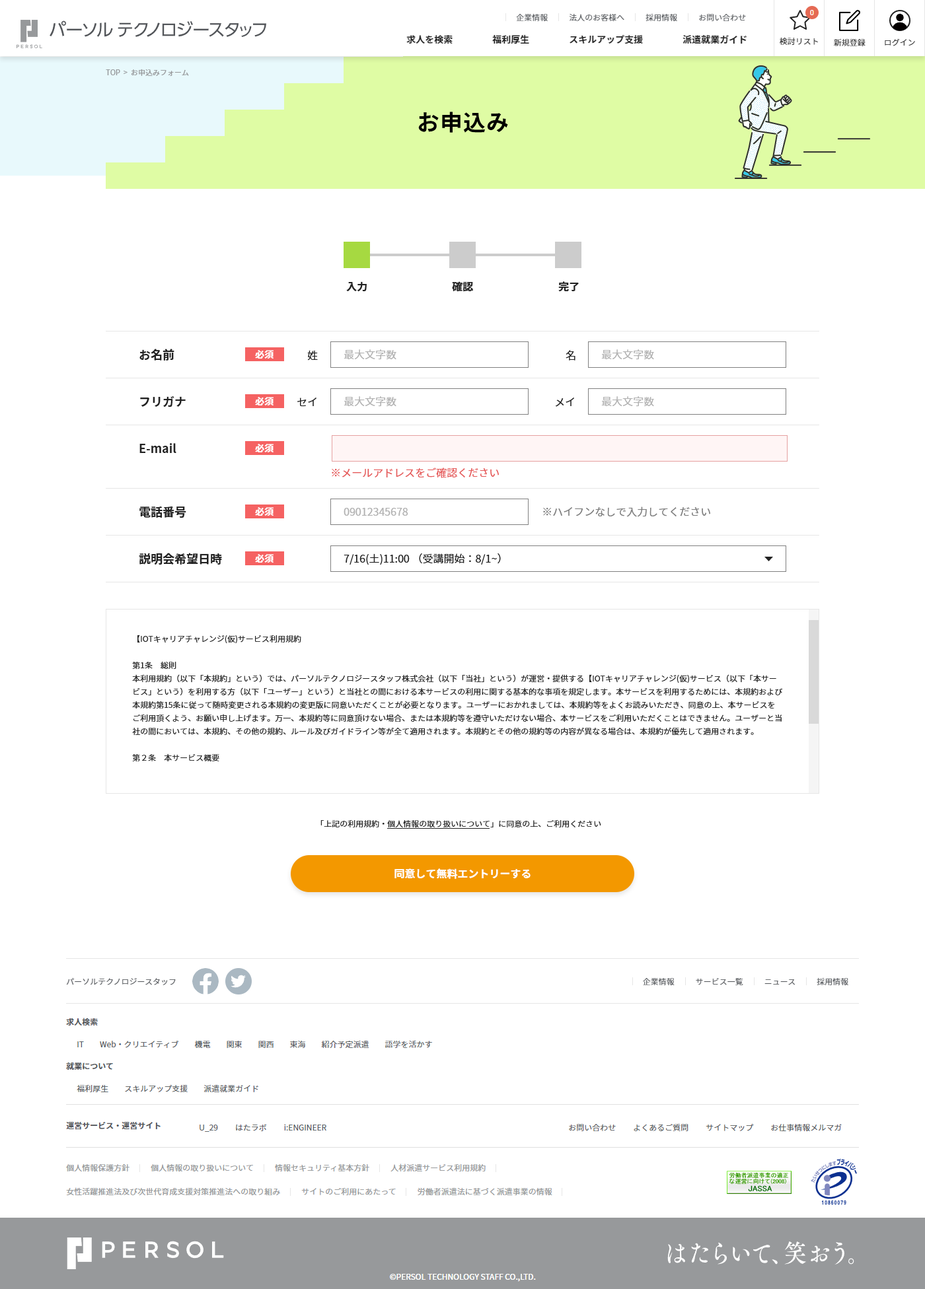
<style>
.page{position:relative;width:925px;height:1289px;background:#ffffff}
.page>*{position:absolute;margin:0}
.t1{font:7.3px "NotoSansJP-Regular";color:#97999b}
.t2{font:22.5px "NotoSansJP-Bold";letter-spacing:0.05em;color:#000000}
.t3{font:10.6px "NotoSansJP-Bold";color:#222222}
.t4{font:11.9px "NotoSansJP-Bold";color:#222222}
.t5{font:9.2px "NotoSansJP-Bold";color:#ffffff}
.t6{font:10.6px "NotoSansJP-Regular";color:#222222}
.t7{font:10.6px "NotoSansJP-Regular";color:#b3b3b3}
.t8{font:10.6px "NotoSansJP-Regular";color:#e65c5c}
.t9{font:10.6px "NotoSansJP-Regular";color:#808080}
.t10{font:7.9px/13.2px "NotoSansJP-Regular";color:#222222}
.t11{font:7.9px "NotoSansJP-Regular";color:#222222}
.t12{font:10.6px "NotoSansJP-Bold";color:#ffffff}
</style>
<div class="page">
<p class="t1" style="left:106px;top:69px;width:83px;height:7px">TOP  &gt;  お申込みフォーム</p>
<p class="t2" style="left:418px;top:112px;width:90px;height:21px">お申込み</p>
<p class="t3" style="left:346px;top:281px;width:21px;height:11px">入力</p>
<p class="t3" style="left:452px;top:281px;width:21px;height:11px">確認</p>
<p class="t3" style="left:558px;top:281px;width:21px;height:11px">完了</p>
<p class="t4" style="left:139px;top:349px;width:35px;height:12px">お名前</p>
<p class="t5" style="left:255px;top:350px;width:18px;height:9px">必須</p>
<p class="t6" style="left:307px;top:350px;width:11px;height:11px">姓</p>
<p class="t7" style="left:343px;top:349px;width:53px;height:11px">最大文字数</p>
<p class="t6" style="left:565px;top:350px;width:10px;height:11px">名</p>
<p class="t7" style="left:601px;top:349px;width:53px;height:11px">最大文字数</p>
<p class="t4" style="left:140px;top:396px;width:46px;height:12px">フリガナ</p>
<p class="t5" style="left:255px;top:397px;width:18px;height:9px">必須</p>
<p class="t6" style="left:297px;top:398px;width:19px;height:9px">セイ</p>
<p class="t7" style="left:343px;top:396px;width:53px;height:11px">最大文字数</p>
<p class="t6" style="left:555px;top:398px;width:19px;height:9px">メイ</p>
<p class="t7" style="left:601px;top:396px;width:53px;height:11px">最大文字数</p>
<p class="t4" style="left:139px;top:443px;width:37px;height:10px">E-mail</p>
<p class="t5" style="left:255px;top:444px;width:18px;height:8px">必須</p>
<p class="t8" style="left:332px;top:468px;width:167px;height:10px">※メールアドレスをご確認ください</p>
<p class="t4" style="left:139px;top:507px;width:47px;height:11px">電話番号</p>
<p class="t5" style="left:255px;top:507px;width:18px;height:9px">必須</p>
<p class="t7" style="left:343px;top:508px;width:65px;height:8px">09012345678</p>
<p class="t9" style="left:543px;top:507px;width:167px;height:10px">※ハイフンなしで入力してください</p>
<p class="t4" style="left:139px;top:553px;width:83px;height:12px">説明会希望日時</p>
<p class="t5" style="left:255px;top:554px;width:18px;height:9px">必須</p>
<p class="t6" style="left:343px;top:554px;width:158px;height:11px">7/16(土)11:00 （受講開始：8/1~）</p>
<p class="t10" style="left:132px;top:635px;width:651px;height:127px">【IOTキャリアチャレンジ(仮)サービス利用規約<br><br>第1条　総則  <br>本利用規約（以下「本規約」という）では、パーソルテクノロジースタッフ株式会社（以下「当社」という）が運営・提供する【IOTキャリアチャレンジ(仮)サービス（以下「本サービス」という）を利用する方（以下「ユーザー」という）と当社との間における本サービスの利用に関する基本的な事項を規定します。本サービスを利用するためには、本規約および本規約第15条に従って随時変更される本規約の変更版に同意いただくことが必要となります。ユーザーにおかれましては、本規約等をよくお読みいただき、同意の上、本サービスをご利用頂くよう、お願い申し上げます。万一、本規約等に同意頂けない場合、または本規約等を遵守いただけない場合、本サービスをご利用いただくことはできません。ユーザーと当社の間においては、本規約、その他の規約、ルール及びガイドライン等が全て適用されます。本規約とその他の規約等の内容が異なる場合は、本規約が優先して適用されます。<br><br>第２条　本サービス概要</p>
<p class="t11" style="left:320px;top:820px;width:281px;height:8px">「上記の利用規約・個人情報の取り扱いについて」に同意の上、ご利用ください</p>
<p class="t12" style="left:394px;top:869px;width:136px;height:10px">同意して無料エントリーする</p>
</div>
